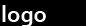
<style>
.page{position:relative;width:86px;height:26px;background:#000000}
.page>*{position:absolute;margin:0}
.t1{font:24px "Corbel-Bold";color:#ffffff}
</style>
<div class="page">
<p class="t1" style="left:2px;top:5px;width:44px;height:22px">logo</p>
</div>
